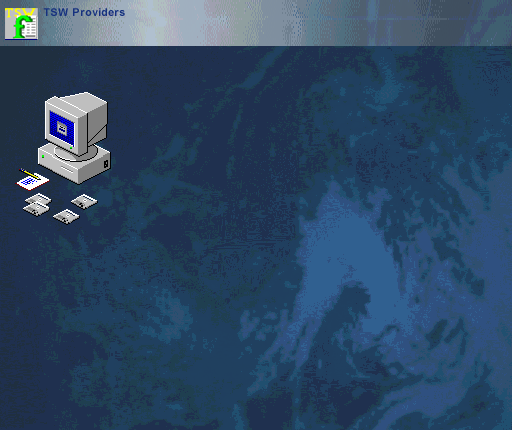
<style>
.page{position:relative;width:512px;height:430px;background:#1f304f}
.page>*{position:absolute;margin:0}
.t1{font:10.7px "Arial-BoldMT";color:#16317f}
</style>
<div class="page">
<p class="t1" style="left:43px;top:8px;width:82px;height:8px">TSW Providers</p>
</div>
